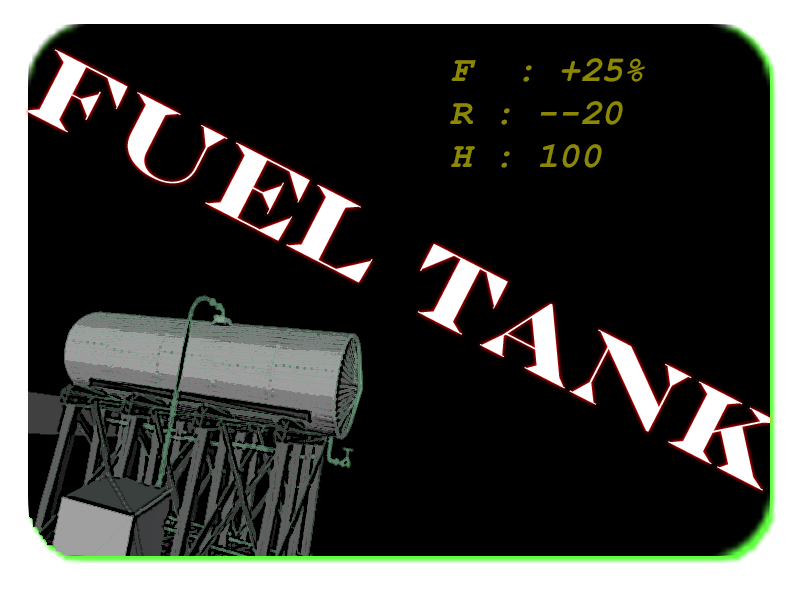
<style>
.page{position:relative;width:800px;height:600px;background:#000000}
.page>*{position:absolute;margin:0}
.t1{font:36px "CourierNewPS-BoldItalicMT";color:#8c8704}
</style>
<div class="page">
<p class="t1" style="left:450px;top:58px;width:195px;height:110px">F  : +25%<br>R : --20<br>H : 100</p>
</div>
